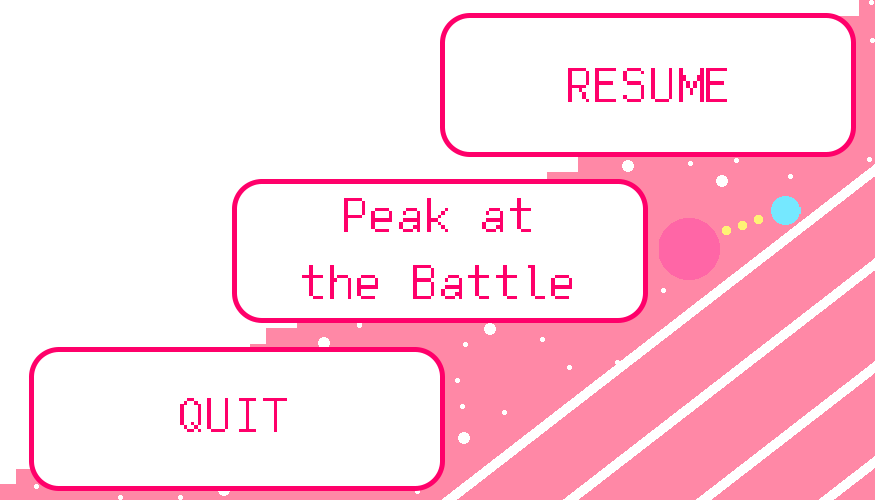
<style>
.page{position:relative;width:875px;height:500px;background:#ffffff}
.page>*{position:absolute;margin:0}
.t1{font:55.3px "FreePixel-Regular";color:#ff006a}
</style>
<div class="page">
<p class="t1" style="left:568px;top:68px;width:159px;height:34px">RESUME</p>
<p class="t1" style="left:302px;top:198px;width:270px;height:101px;text-align:center">Peak at<br>the Battle</p>
<p class="t1" style="left:180px;top:398px;width:107px;height:34px">QUIT</p>
</div>
